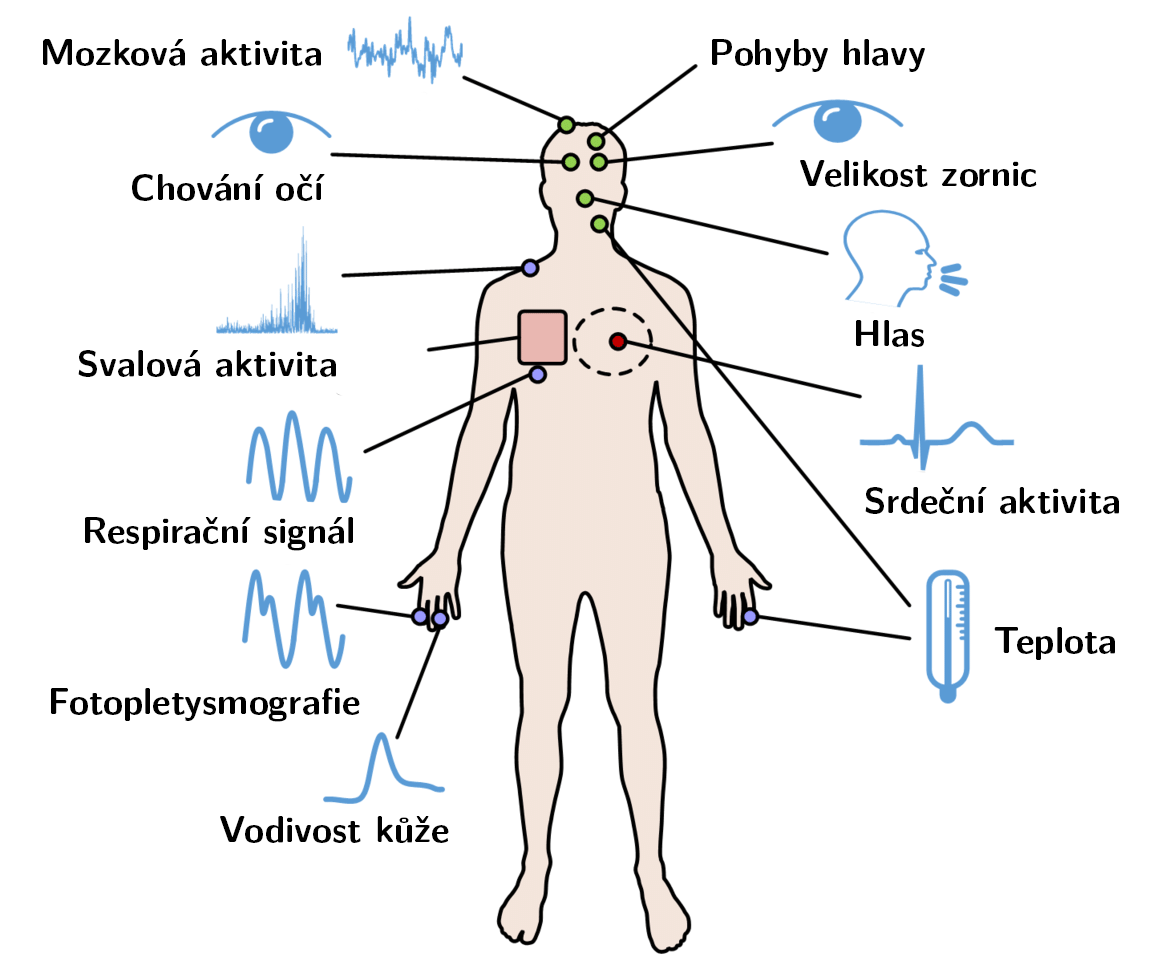
<style>
.page{position:relative;width:1164px;height:957px;background:#ffffff}
.page>*{position:absolute;margin:0}
.t1{font:36px "LMSans10-Bold";color:#000000}
</style>
<div class="page">
<p class="t1" style="left:43px;top:39px;width:278px;height:27px">Mozková aktivita</p>
<p class="t1" style="left:712px;top:39px;width:213px;height:33px">Pohyby hlavy</p>
<p class="t1" style="left:800px;top:160px;width:237px;height:27px">Velikost zornic</p>
<p class="t1" style="left:132px;top:174px;width:193px;height:27px">Chování očí</p>
<p class="t1" style="left:856px;top:320px;width:68px;height:27px">Hlas</p>
<p class="t1" style="left:78px;top:350px;width:258px;height:27px">Svalová aktivita</p>
<p class="t1" style="left:865px;top:487px;width:254px;height:27px">Srdeční aktivita</p>
<p class="t1" style="left:85px;top:517px;width:268px;height:34px">Respirační signál</p>
<p class="t1" style="left:994px;top:627px;width:121px;height:33px">Teplota</p>
<p class="t1" style="left:51px;top:688px;width:309px;height:34px">Fotopletysmografie</p>
<p class="t1" style="left:220px;top:816px;width:229px;height:27px">Vodivost kůže</p>
</div>
